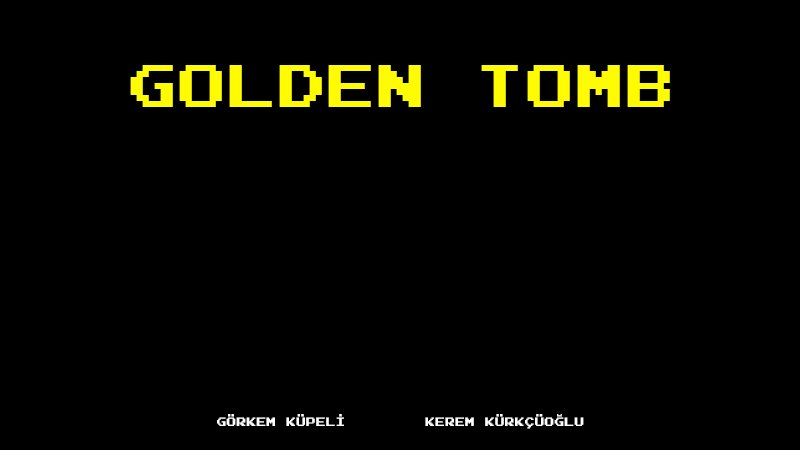
<style>
.page{position:relative;width:800px;height:450px;background:#000000}
.page>*{position:absolute;margin:0}
.t1{font:60px "JoystixMonospace-Regular";color:#fffb00}
.t2{font:12px "JoystixMonospace-Regular";color:#ffffff}
</style>
<div class="page">
<p class="t1" style="left:130px;top:65px;width:540px;height:42px">golden tomb</p>
<p class="t2" style="left:217px;top:414px;width:367px;height:15px">GÖRKEM KÜPELİ        KEREM KÜRKÇÜOĞLU</p>
</div>
